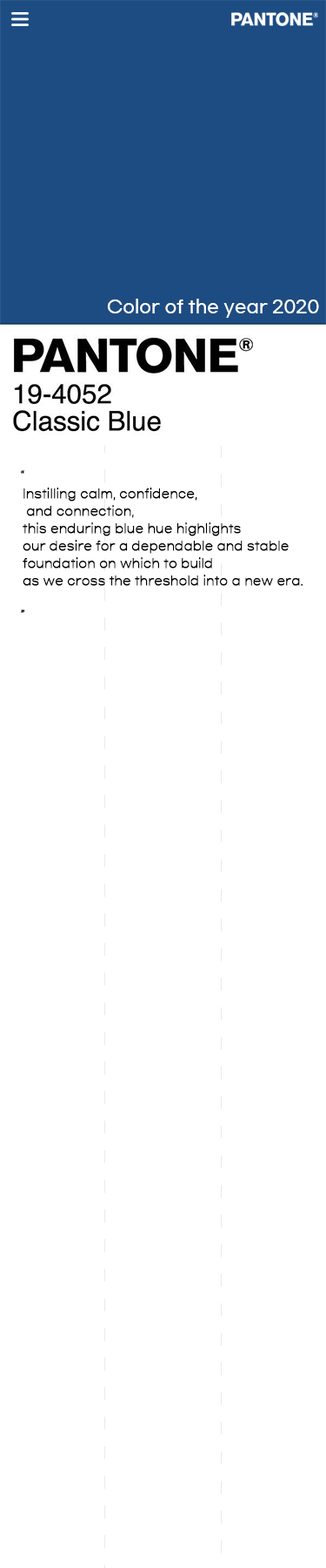
<style>
.page{position:relative;width:326px;height:1568px;background:#ffffff}
.page>*{position:absolute;margin:0}
.t1{font:17.4px "GmarketSansTTFMedium";color:#ffffff}
.t2{font:12.2px/17.4px "GmarketSansTTFLight";color:#000000;font-weight:bold}
</style>
<div class="page">
<p class="t1" style="left:107px;top:299px;width:213px;height:19px">Color of the year 2020</p>
<p class="t2" style="left:20px;top:470px;width:284px;height:143px;text-align:center">“<br>Instilling calm, confidence,<br> and connection, <br>this enduring blue hue highlights <br>our desire for a dependable and stable<br>foundation on which to build <br>as we cross the threshold into a new era.<br><br>”</p>
</div>
